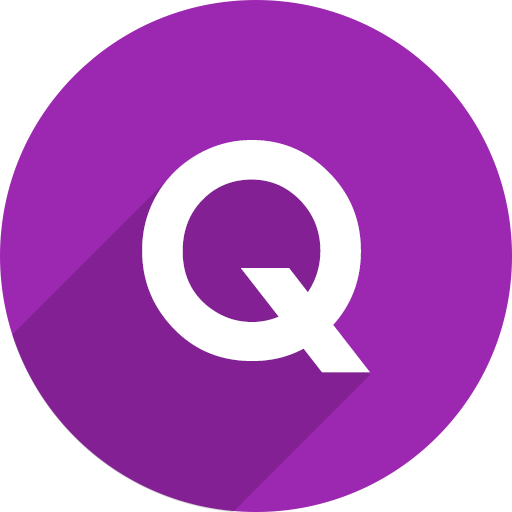
<style>
.page{position:relative;width:512px;height:512px;background:#9c27b0}
.page>*{position:absolute;margin:0}
.t1{font:292.8px "CenturyGothic-Bold";color:#ffffff}
</style>
<div class="page">
<p class="t1" style="left:142px;top:140px;width:228px;height:233px">Q</p>
</div>
